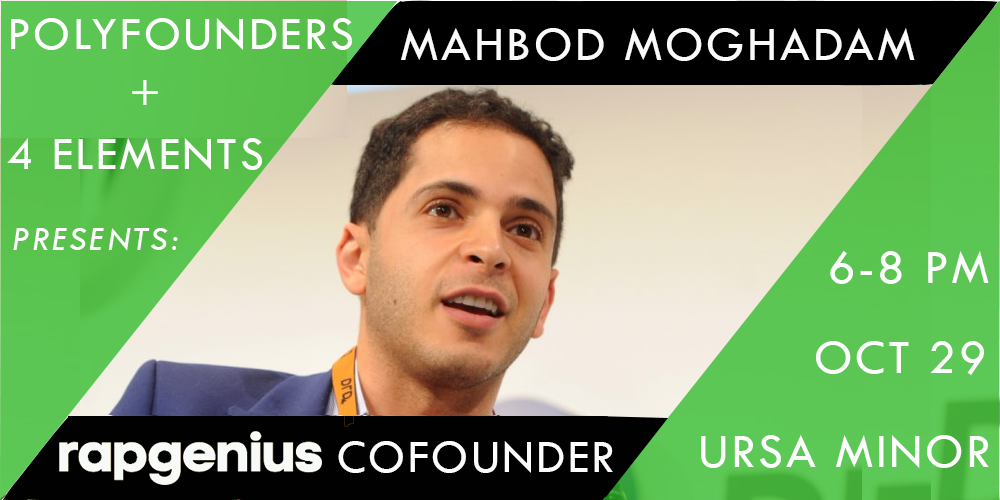
<style>
.page{position:relative;width:1000px;height:500px}
.page>*{position:absolute;margin:0}
.t1{font:48px "TwCenMT-Regular";letter-spacing:0.05em;color:#fefdfd}
.t2{font:50px "TwCenMT-Regular";letter-spacing:0.05em;color:#f9faf9}
.t3{font:36px "TwCenMT-Italic";letter-spacing:0.05em;color:#fefdfd}
.t4{font:50px "TwCenMT-Regular";letter-spacing:0.05em;color:#fefdfd}
</style>
<div class="page">
<p class="t1" style="left:11px;top:18px;width:341px;height:32px">POLYFOUNDERS</p>
<p class="t2" style="left:401px;top:28px;width:514px;height:33px">MAHBOD MOGHADAM</p>
<p class="t1" style="left:132px;top:80px;width:26px;height:25px">+</p>
<p class="t1" style="left:7px;top:138px;width:255px;height:32px">4 ELEMENTS</p>
<p class="t3" style="left:13px;top:228px;width:165px;height:23px">PRESENTS:</p>
<p class="t4" style="left:830px;top:251px;width:159px;height:33px">6-8 PM</p>
<p class="t4" style="left:815px;top:341px;width:169px;height:34px">OCT 29</p>
<p class="t4" style="left:701px;top:435px;width:288px;height:33px">URSA MINOR</p>
<p class="t1" style="left:338px;top:441px;width:275px;height:32px">COFOUNDER</p>
</div>
